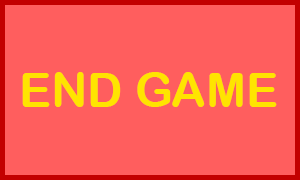
<style>
.page{position:relative;width:300px;height:180px;background:#ff5e5e}
.page>*{position:absolute;margin:0}
.t1{font:48px "ArialRoundedMTBold";color:#ffe400}
</style>
<div class="page">
<p class="t1" style="left:22px;top:72px;width:255px;height:35px">END GAME</p>
</div>
